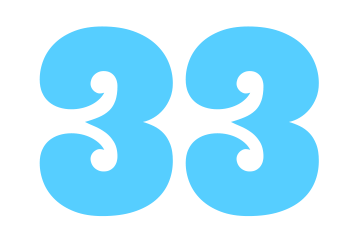
<style>
.page{position:relative;width:354px;height:236px;background:#ffffff}
.page>*{position:absolute;margin:0}
.t1{font:250px "SpicyRice-Regular";color:#56ceff}
</style>
<div class="page">
<p class="t1" style="left:39px;top:26px;width:280px;height:191px">33</p>
</div>
